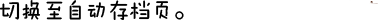
<style>
.page{position:relative;width:391px;height:20px;background:#ffffff}
.page>*{position:absolute;margin:0}
.t1{font:24px "¢è?";color:#000000}
</style>
<div class="page">
<p class="t1" style="left:0px;top:0px;width:184px;height:20px">切换至自动存档页。</p>
</div>
